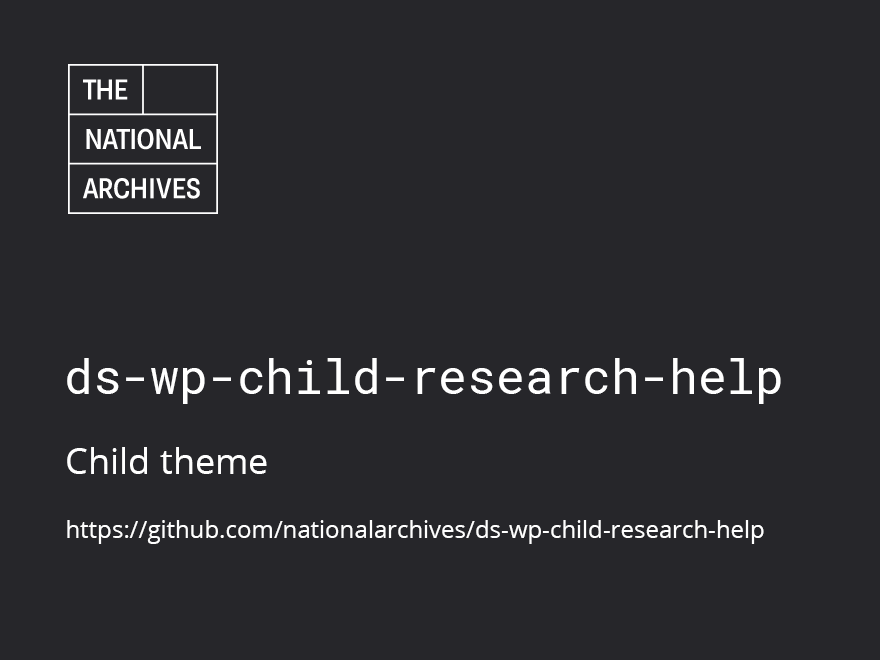
<style>
.page{position:relative;width:880px;height:660px;background:#26262a}
.page>*{position:absolute;margin:0}
.t1{font:48px "RobotoMono-Regular";color:#ffffff}
.t2{font:24px "OpenSans";color:#ffffff}
.t3{font:36px "OpenSans";color:#ffffff}
</style>
<div class="page">
<p class="t1" style="left:67px;top:358px;width:714px;height:46px">ds-wp-child-research-help</p>
<p class="t2" style="left:67px;top:447px;width:697px;height:97px"><span class="t3">Child theme<br><br></span>https://github.com/nationalarchives/ds-wp-child-research-help</p>
</div>
